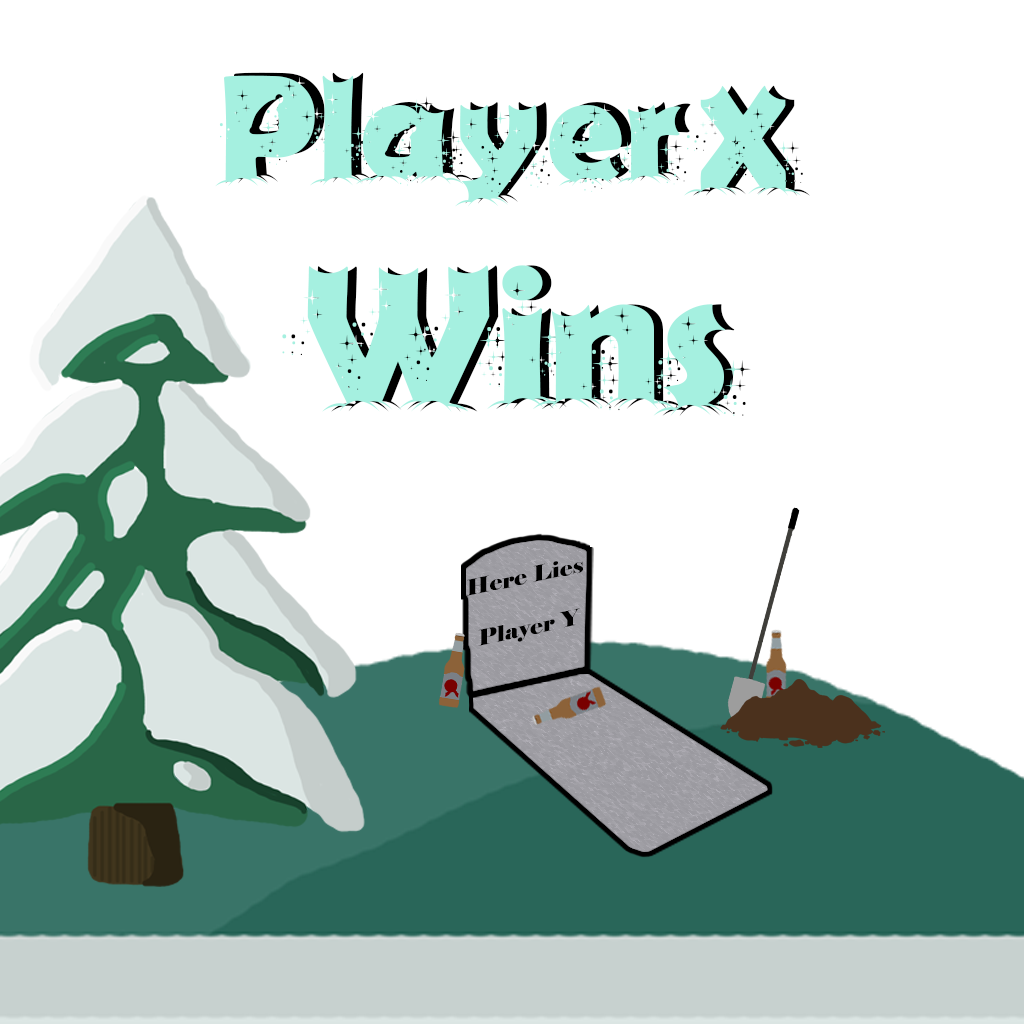
<style>
.page{position:relative;width:1024px;height:1024px;background:#ffffff}
.page>*{position:absolute;margin:0}
.t1{font:150px "FirstChristmas"}
.t2{font:150px "FirstChristmas";color:#a5f0e0}
.t3{font:200px "FirstChristmas";color:#a5f0e0}
.t4{font:21.6px "Elephant-Regular";color:#000000;scale:1.11 1}
</style>
<div class="page">
<p class="t1" style="left:225px;top:72px;width:466px;height:132px">Player</p>
<p class="t2" style="left:693px;top:85px;width:117px;height:111px">X</p>
<p class="t3" style="left:291px;top:265px;width:460px;height:151px">Wins</p>
<p class="t4" style="left:467px;top:561px;width:116px;height:85px;rotate:-12deg">Here Lies <br>  <br>  Player Y</p>
</div>
